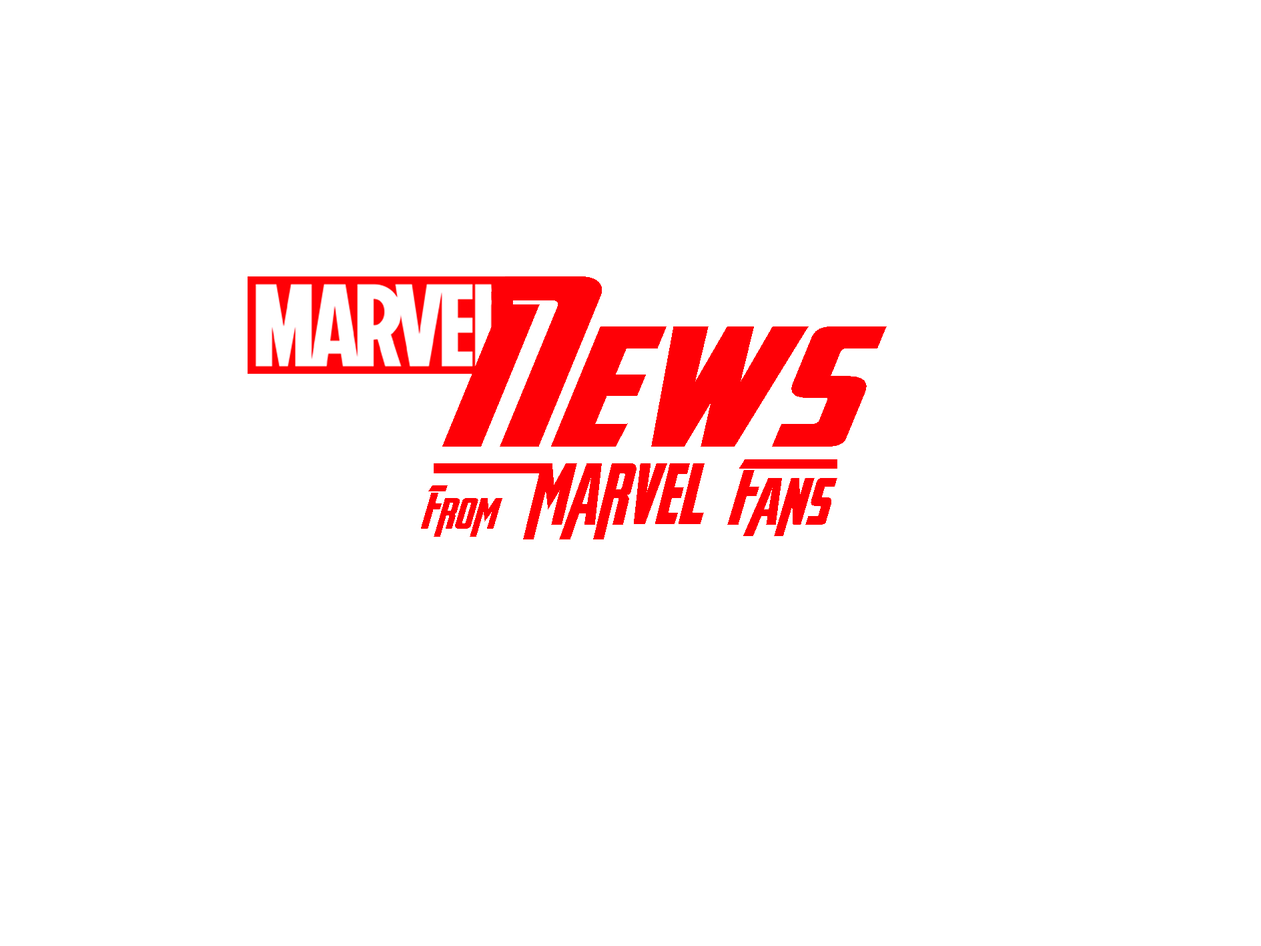
<style>
.page{position:relative;width:1261px;height:946px;background:#ffffff}
.page>*{position:absolute;margin:0}
.t1{font:63.9px "AvengeanceHeroicAvengerItalic";color:#ff0006}
.t2{font:83.8px "AvengeanceHeroicAvengerItalic";color:#ff0006;scale:0.83 1}
.t3{font:42.3px "AvengeanceHeroicAvengerItalic";color:#ff0006}
</style>
<div class="page">
<p class="t1" style="left:727px;top:459px;width:110px;height:77px">Fans</p>
<p class="t2" style="left:523px;top:463px;width:182px;height:76px">marvel</p>
<p class="t3" style="left:421px;top:485px;width:81px;height:51px">From</p>
</div>
